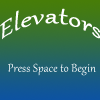
<style>
.page{position:relative;width:100px;height:100px}
.page>*{position:absolute;margin:0}
.t1{font:28.6px "Gabriola";letter-spacing:0.015em;color:#ffffff;scale:1.21 1}
.t2{font:14px "Gabriola";letter-spacing:0.015em;color:#ffffff}
</style>
<div class="page">
<p class="t1" style="left:0px;top:8px;width:100px;height:32px">Elevators</p>
<p class="t2" style="left:8px;top:63px;width:88px;height:13px">Press Space to Begin</p>
</div>
